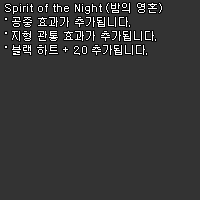
<style>
.page{position:relative;width:200px;height:200px;background:#333333}
.page>*{position:absolute;margin:0}
.t1{font:11px/14px "Dotum";color:#ffffff}
</style>
<div class="page">
<p class="t1" style="left:5px;top:3px;width:157px;height:52px">Spirit of the Night (밤의 영혼)<br>˚ 공중 효과가 추가됩니다.<br>˚ 지형 관통 효과가 추가됩니다.<br>˚ 블랙 하트 + 2.0 추가됩니다.</p>
</div>
